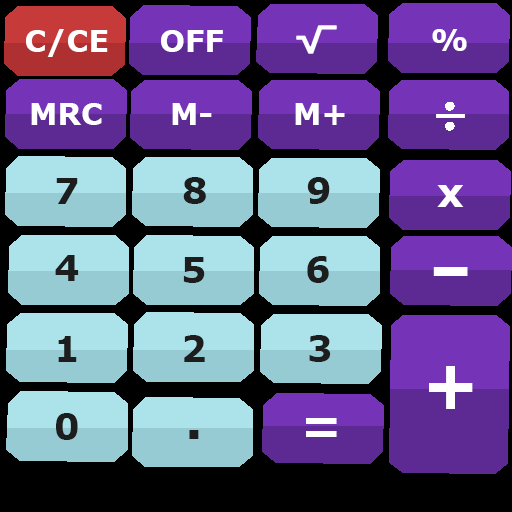
<style>
.page{position:relative;width:512px;height:512px;background:#000000}
.page>*{position:absolute;margin:0}
.t1{font:30px "Verdana-Bold";color:#ffffff}
.t2{font:36px "Verdana-Bold";color:#1d1d1d}
.t3{font:40.4px "Verdana-Bold";color:#ffffff}
.t4{font:65.5px "Verdana-Bold";color:#ffffff;scale:1.37 1}
.t5{font:65.5px "Verdana-Bold";color:#ffffff}
.t6{font:48.8px "Verdana-Bold";color:#ffffff}
.t7{font:49.1px "Verdana-Bold";color:#1d1d1d}
</style>
<div class="page">
<p class="t1" style="left:26px;top:29px;width:82px;height:28px">C/CE</p>
<p class="t1" style="left:161px;top:30px;width:62px;height:22px">OFF</p>
<p class="t1" style="left:432px;top:29px;width:35px;height:22px">%</p>
<p class="t1" style="left:31px;top:103px;width:71px;height:22px">MRC</p>
<p class="t1" style="left:172px;top:103px;width:40px;height:22px">M-</p>
<p class="t1" style="left:295px;top:103px;width:50px;height:22px">M+</p>
<p class="t2" style="left:56px;top:178px;width:22px;height:26px">7</p>
<p class="t2" style="left:183px;top:177px;width:23px;height:27px">8</p>
<p class="t2" style="left:307px;top:177px;width:23px;height:27px">9</p>
<p class="t3" style="left:437px;top:185px;width:27px;height:22px">x</p>
<p class="t2" style="left:55px;top:255px;width:24px;height:26px">4</p>
<p class="t2" style="left:183px;top:257px;width:22px;height:26px">5</p>
<p class="t2" style="left:307px;top:256px;width:22px;height:27px">6</p>
<p class="t4" style="left:433px;top:267px;width:35px;height:9px">-</p>
<p class="t2" style="left:58px;top:336px;width:19px;height:26px">1</p>
<p class="t2" style="left:184px;top:335px;width:21px;height:27px">2</p>
<p class="t2" style="left:309px;top:335px;width:22px;height:27px">3</p>
<p class="t5" style="left:429px;top:366px;width:44px;height:43px">+</p>
<p class="t2" style="left:56px;top:413px;width:22px;height:27px">0</p>
<p class="t6" style="left:306px;top:418px;width:31px;height:19px">=</p>
<p class="t7" style="left:189px;top:430px;width:10px;height:9px">.</p>
</div>
